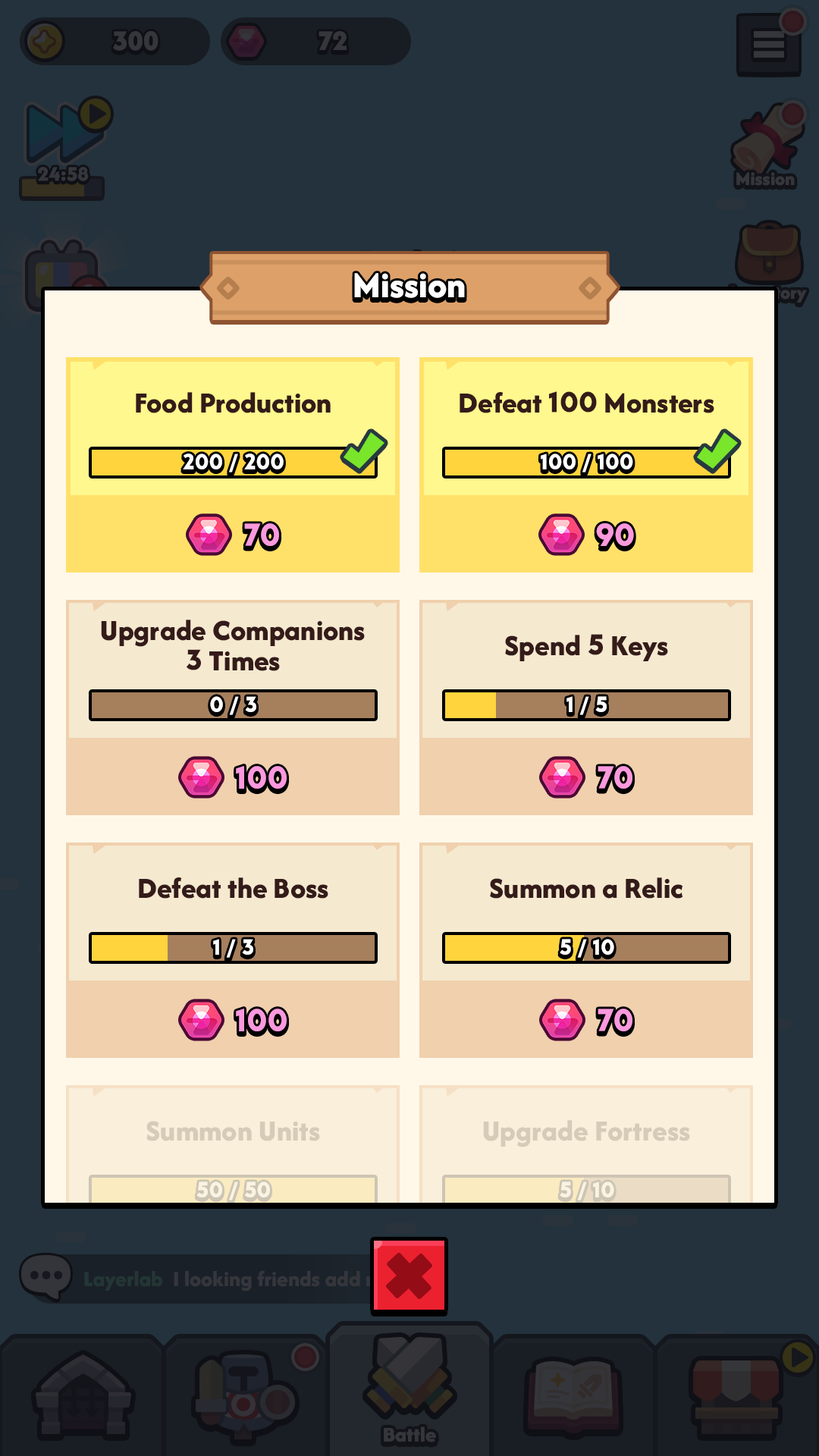
<style>
.page{position:relative;width:819px;height:1456px;background:#23323c}
.page>*{position:absolute;margin:0}
.t1{font:37.9px "AfacadFlux-ExtraBold";color:#ffffff}
.t2{font:30.3px "AfacadFlux-ExtraBold";color:#341b19}
.t3{font:30.3px "LTAvocado-Bold";color:#341b19}
.t4{font:22.7px "LTAvocado-Bold";color:#ffffff}
.t5{font:33.4px "LTAvocado-Bold";color:#fa99dd}
.t6{font:30.3px/30.3px "AfacadFlux-ExtraBold";color:#341b19}
.t7{font:30.3px/30.3px "LTAvocado-Bold";color:#341b19}
.t8{font:30.3px "AfacadFlux-ExtraBold";color:#d6cab9}
.t9{font:22.7px "LTAvocado-Bold";color:#fbf3e2}
</style>
<div class="page">
<p class="t1" style="left:354px;top:273px;width:111px;height:25px">Mission</p>
<p class="t2" style="left:136px;top:392px;width:195px;height:21px">Food Production</p>
<p class="t2" style="left:460px;top:391px;width:254px;height:22px">Defeat <span class="t3">100</span> Monsters</p>
<p class="t4" style="left:183px;top:453px;width:101px;height:19px">200 / 200</p>
<p class="t4" style="left:541px;top:453px;width:92px;height:19px">100 / 100</p>
<p class="t5" style="left:244px;top:523px;width:35px;height:23px">70</p>
<p class="t5" style="left:596px;top:523px;width:38px;height:23px">90</p>
<p class="t6" style="left:101px;top:620px;width:264px;height:51px;text-align:center">Upgrade Companions<br><span class="t7">3</span> Times</p>
<p class="t2" style="left:505px;top:634px;width:163px;height:27px">Spend <span class="t3">5</span> Keys</p>
<p class="t4" style="left:210px;top:696px;width:46px;height:19px">0 / 3</p>
<p class="t4" style="left:566px;top:696px;width:41px;height:19px">1 / 5</p>
<p class="t5" style="left:236px;top:766px;width:51px;height:23px">100</p>
<p class="t5" style="left:598px;top:766px;width:34px;height:23px">70</p>
<p class="t2" style="left:139px;top:877px;width:189px;height:22px">Defeat the Boss</p>
<p class="t2" style="left:490px;top:877px;width:193px;height:22px">Summon a Relic</p>
<p class="t4" style="left:213px;top:939px;width:40px;height:19px">1 / 3</p>
<p class="t4" style="left:560px;top:939px;width:54px;height:19px">5 / 10</p>
<p class="t5" style="left:236px;top:1009px;width:51px;height:22px">100</p>
<p class="t5" style="left:598px;top:1009px;width:34px;height:22px">70</p>
<p class="t8" style="left:146px;top:1121px;width:174px;height:20px">Summon Units</p>
<p class="t8" style="left:483px;top:1120px;width:207px;height:27px">Upgrade Fortress</p>
<p class="t9" style="left:196px;top:1181px;width:74px;height:19px">50 / 50</p>
<p class="t9" style="left:560px;top:1181px;width:54px;height:19px">5 / 10</p>
</div>
